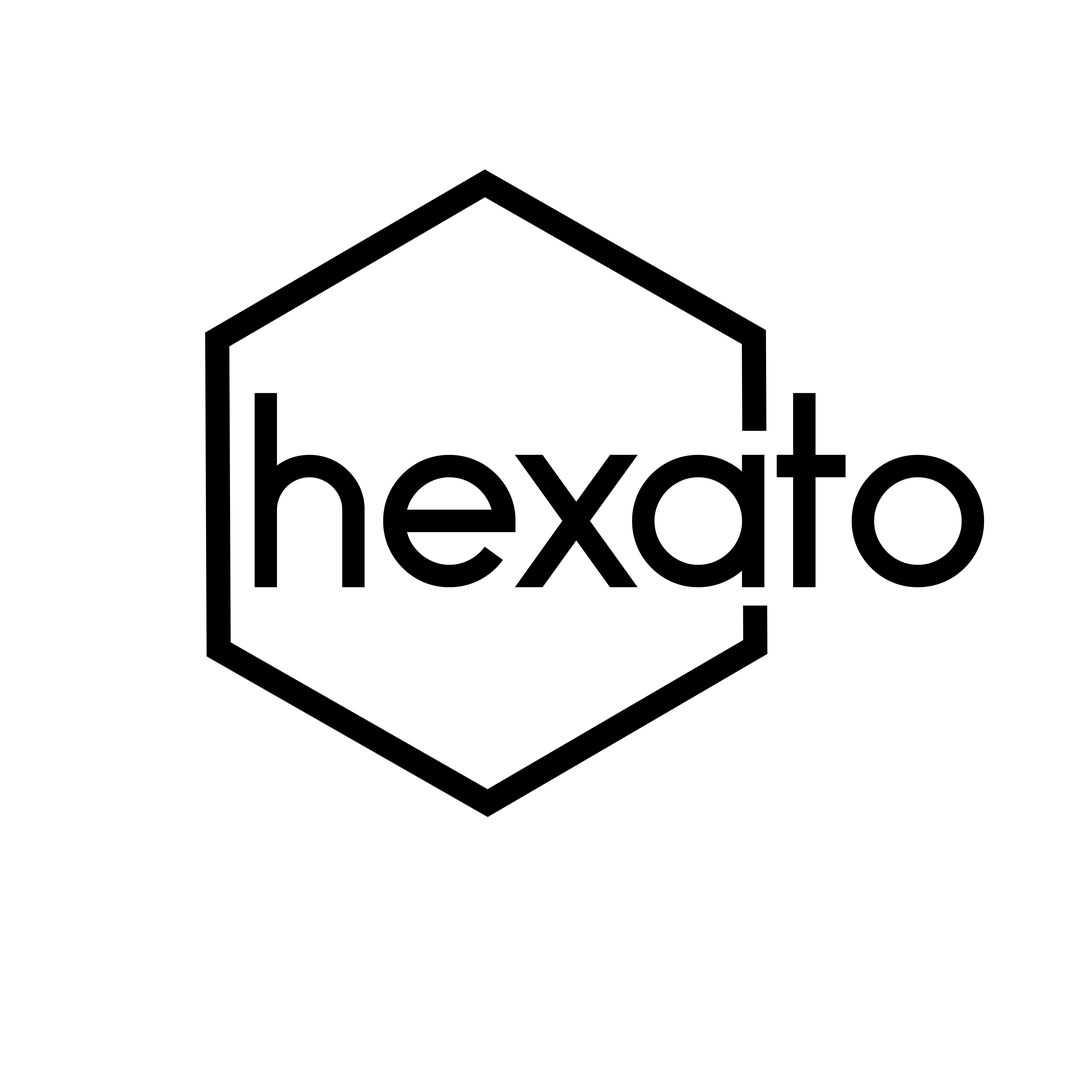
<style>
.page{position:relative;width:1092px;height:1092px;background:#ffffff}
.page>*{position:absolute;margin:0}
.t1{font:248.2px "Anke";color:#000000}
</style>
<div class="page">
<p class="t1" style="left:254px;top:393px;width:730px;height:194px">hexato</p>
</div>
